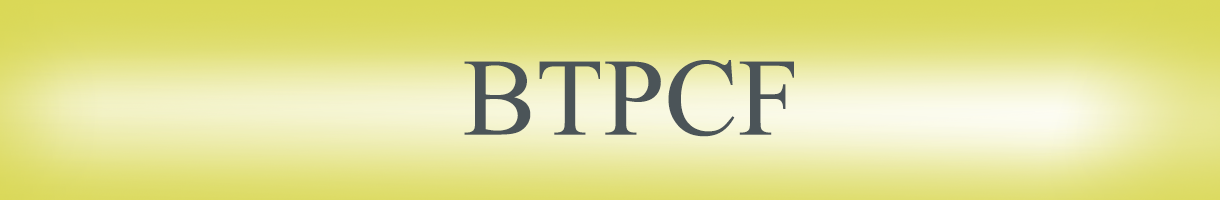
<style>
.page{position:relative;width:1220px;height:200px}
.page>*{position:absolute;margin:0}
.t1{font:110px "MongolianBaiti";color:#4b5458}
</style>
<div class="page">
<p class="t1" style="left:464px;top:60px;width:330px;height:77px">BTPCF</p>
</div>
